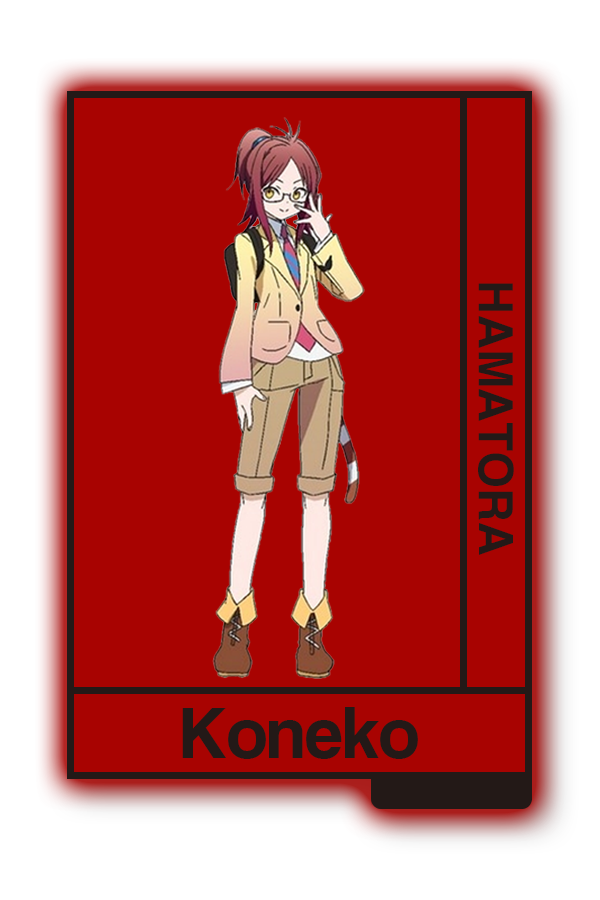
<style>
.page{position:relative;width:600px;height:900px;background:#a80301}
.page>*{position:absolute;margin:0}
.t1{font:47.4px "Helvetica-Bold";color:#231917}
.t2{font:75px "CoolveticaRg-Regular";color:#231917}
</style>
<div class="page">
<p class="t1" style="left:478px;top:283px;width:36px;height:272px;rotate:90deg">HAMATORA</p>
<p class="t2" style="left:182px;top:707px;width:236px;height:52px">Koneko</p>
</div>
